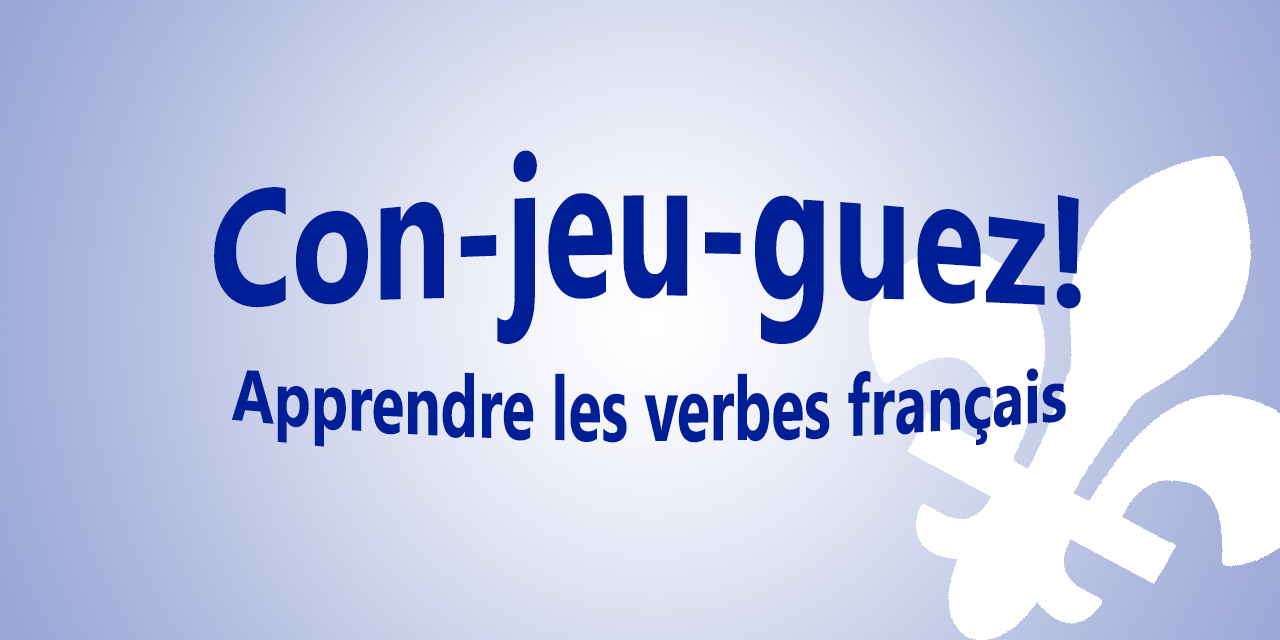
<style>
.page{position:relative;width:1280px;height:640px}
.page>*{position:absolute;margin:0}
.t1{font:60px/24px "SegoeUI-Bold";color:#001f97}
.t2{font:132px/24px "SegoeUI-Bold";color:#001f97}
</style>
<div class="page">
<p class="t1" style="left:214px;top:150px;width:867px;height:297px;text-align:center"><span class="t2">Con-jeu-guez!<br><br><br></span><br>Apprendre les verbes français</p>
</div>
